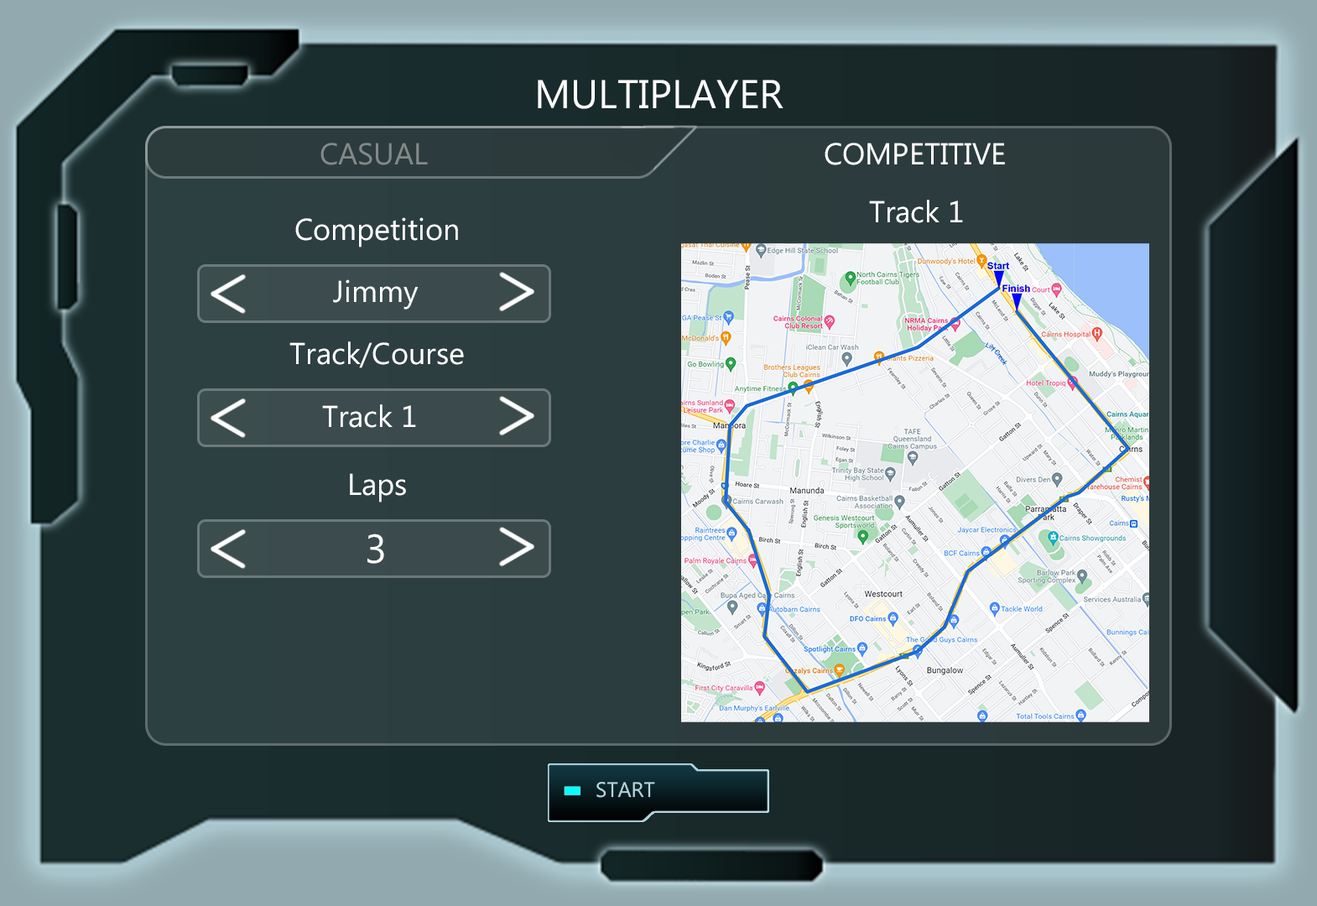
<style>
.page{position:relative;width:1317px;height:906px}
.page>*{position:absolute;margin:0}
.t1{font:40.3px "MicrosoftPhagsPa";color:#ffffff}
.t2{font:30.2px "MicrosoftPhagsPa";color:#828989}
.t3{font:30.2px "MicrosoftPhagsPa";color:#ffffff}
</style>
<div class="page">
<p class="t1" style="left:538px;top:80px;width:245px;height:29px">MULTIPLAYER</p>
<p class="t2" style="left:320px;top:143px;width:108px;height:22px">CASUAL</p>
<p class="t3" style="left:824px;top:143px;width:181px;height:22px">COMPETITIVE</p>
<p class="t3" style="left:869px;top:200px;width:94px;height:23px">Track 1</p>
<p class="t3" style="left:295px;top:217px;width:163px;height:30px">Competition</p>
<p class="t3" style="left:333px;top:279px;width:85px;height:30px">Jimmy</p>
<p class="t3" style="left:289px;top:341px;width:175px;height:27px">Track/Course</p>
<p class="t3" style="left:322px;top:404px;width:94px;height:24px">Track 1</p>
<p class="t3" style="left:350px;top:473px;width:56px;height:29px">Laps</p>
<p class="t1" style="left:367px;top:533px;width:17px;height:31px">3</p>
</div>
